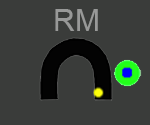
<style>
.page{position:relative;width:150px;height:125px;background:#3a3c3a}
.page>*{position:absolute;margin:0}
.t1{font:30px "ArialMT";color:#989998}
</style>
<div class="page">
<p class="t1" style="left:55px;top:9px;width:43px;height:22px">RMa</p>
</div>
